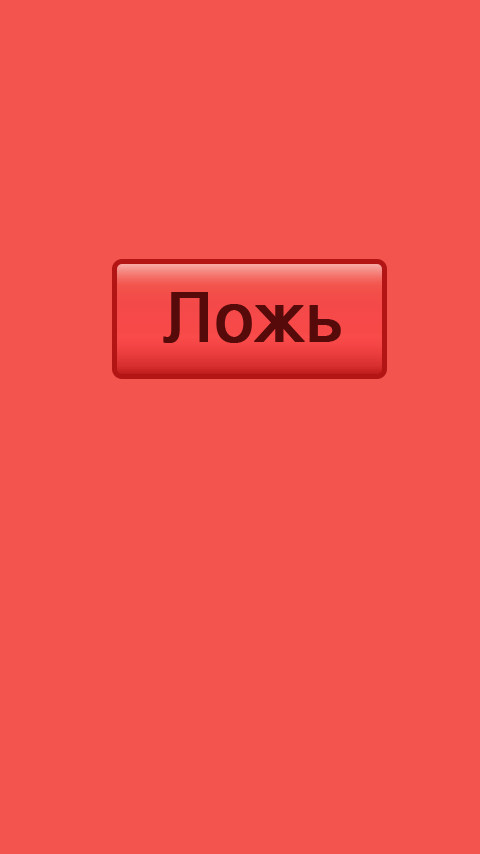
<style>
.page{position:relative;width:480px;height:854px;background:#f3554e}
.page>*{position:absolute;margin:0}
.t1{font:69.4px "MicrosoftSansSerif";color:#560a0a;font-weight:bold}
</style>
<div class="page">
<p class="t1" style="left:163px;top:292px;width:178px;height:51px">Ложь</p>
</div>
